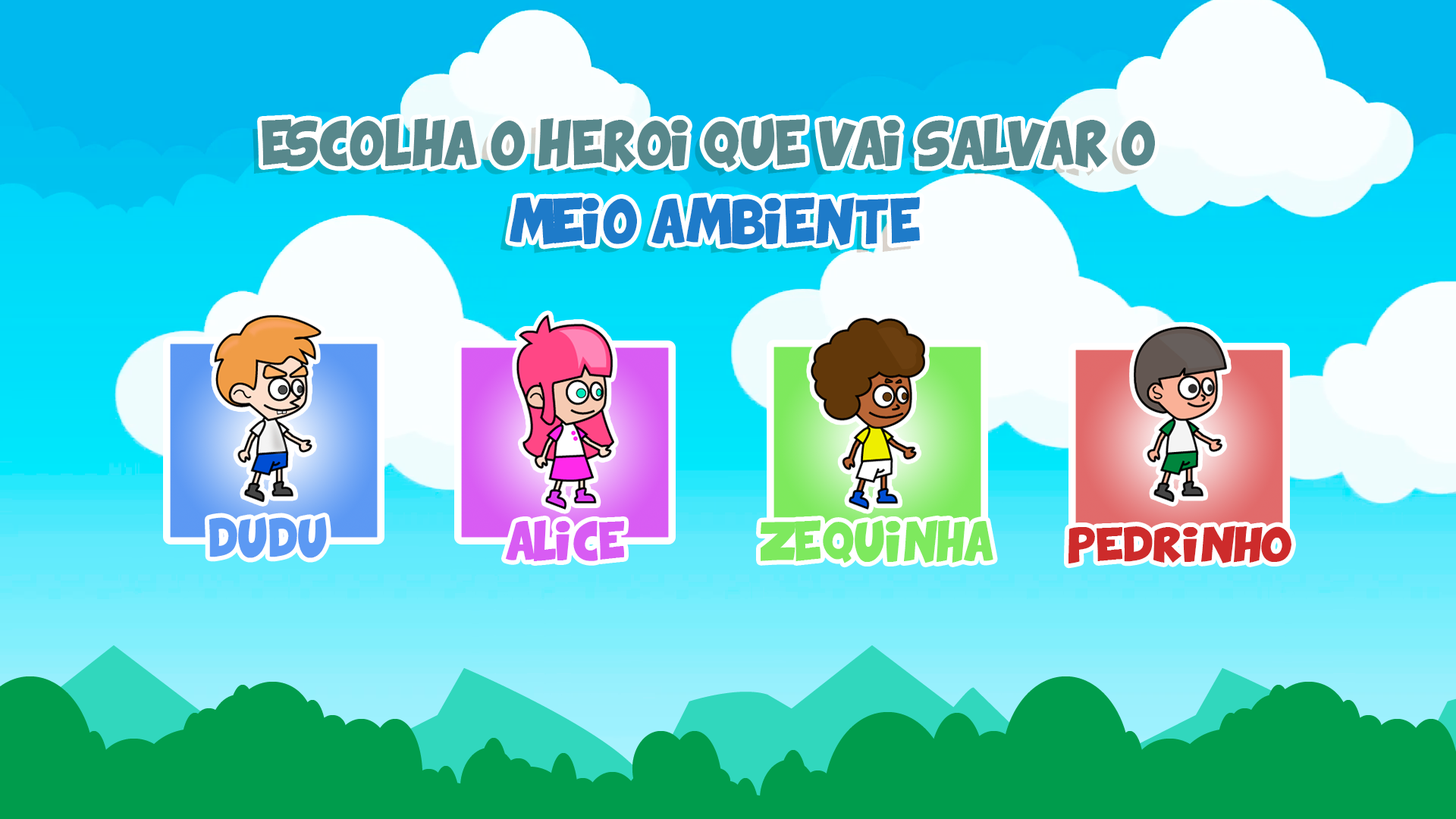
<style>
.page{position:relative;width:1456px;height:819px}
.page>*{position:absolute;margin:0}
.t1{font:30.7px/78.6px "ComixLoud";color:#58888c}
.t2{font:30.7px/78.6px "ComixLoud";color:#1e7bc9}
.t3{font:26.7px "ComixLoud";color:#5c99f3}
.t4{font:26.7px "ComixLoud";color:#d85cf3}
.t5{font:27.2px "ComixLoud";color:#7ee95e}
.t6{font:23.8px "ComixLoud";color:#cd2b2b;scale:1.14 1}
</style>
<div class="page">
<p class="t1" style="left:262px;top:118px;width:893px;height:128px;text-align:center">ESCOLHA O HEROI QUE VAI SALVAR O <br><span class="t2">MEIO AMBIENTE</span></p>
<p class="t3" style="left:209px;top:517px;width:118px;height:41px">DUDU</p>
<p class="t4" style="left:505px;top:520px;width:120px;height:41px">ALICE</p>
<p class="t5" style="left:761px;top:519px;width:232px;height:44px">ZEQUINHA</p>
<p class="t6" style="left:1068px;top:526px;width:223px;height:38px">PEDRINHO</p>
</div>
